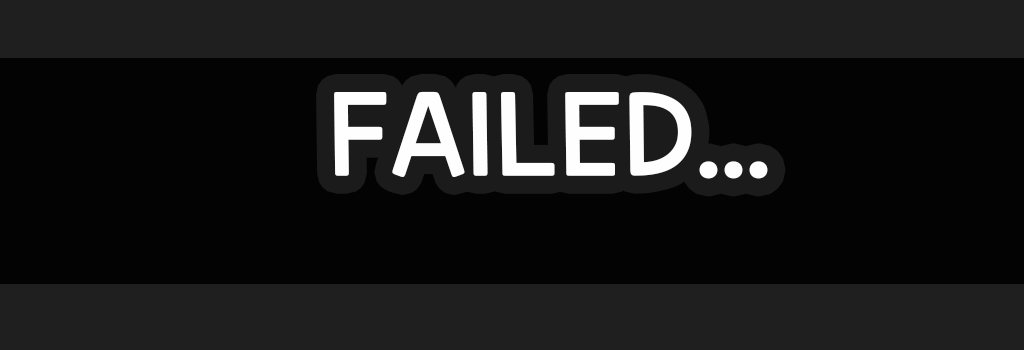
<style>
.page{position:relative;width:1024px;height:350px;background:#030303}
.page>*{position:absolute;margin:0}
.t1{font:110px "CookieRun-Regular";color:#fefefe}
</style>
<div class="page">
<p class="t1" style="left:334px;top:91px;width:434px;height:88px">FAILED...</p>
</div>
